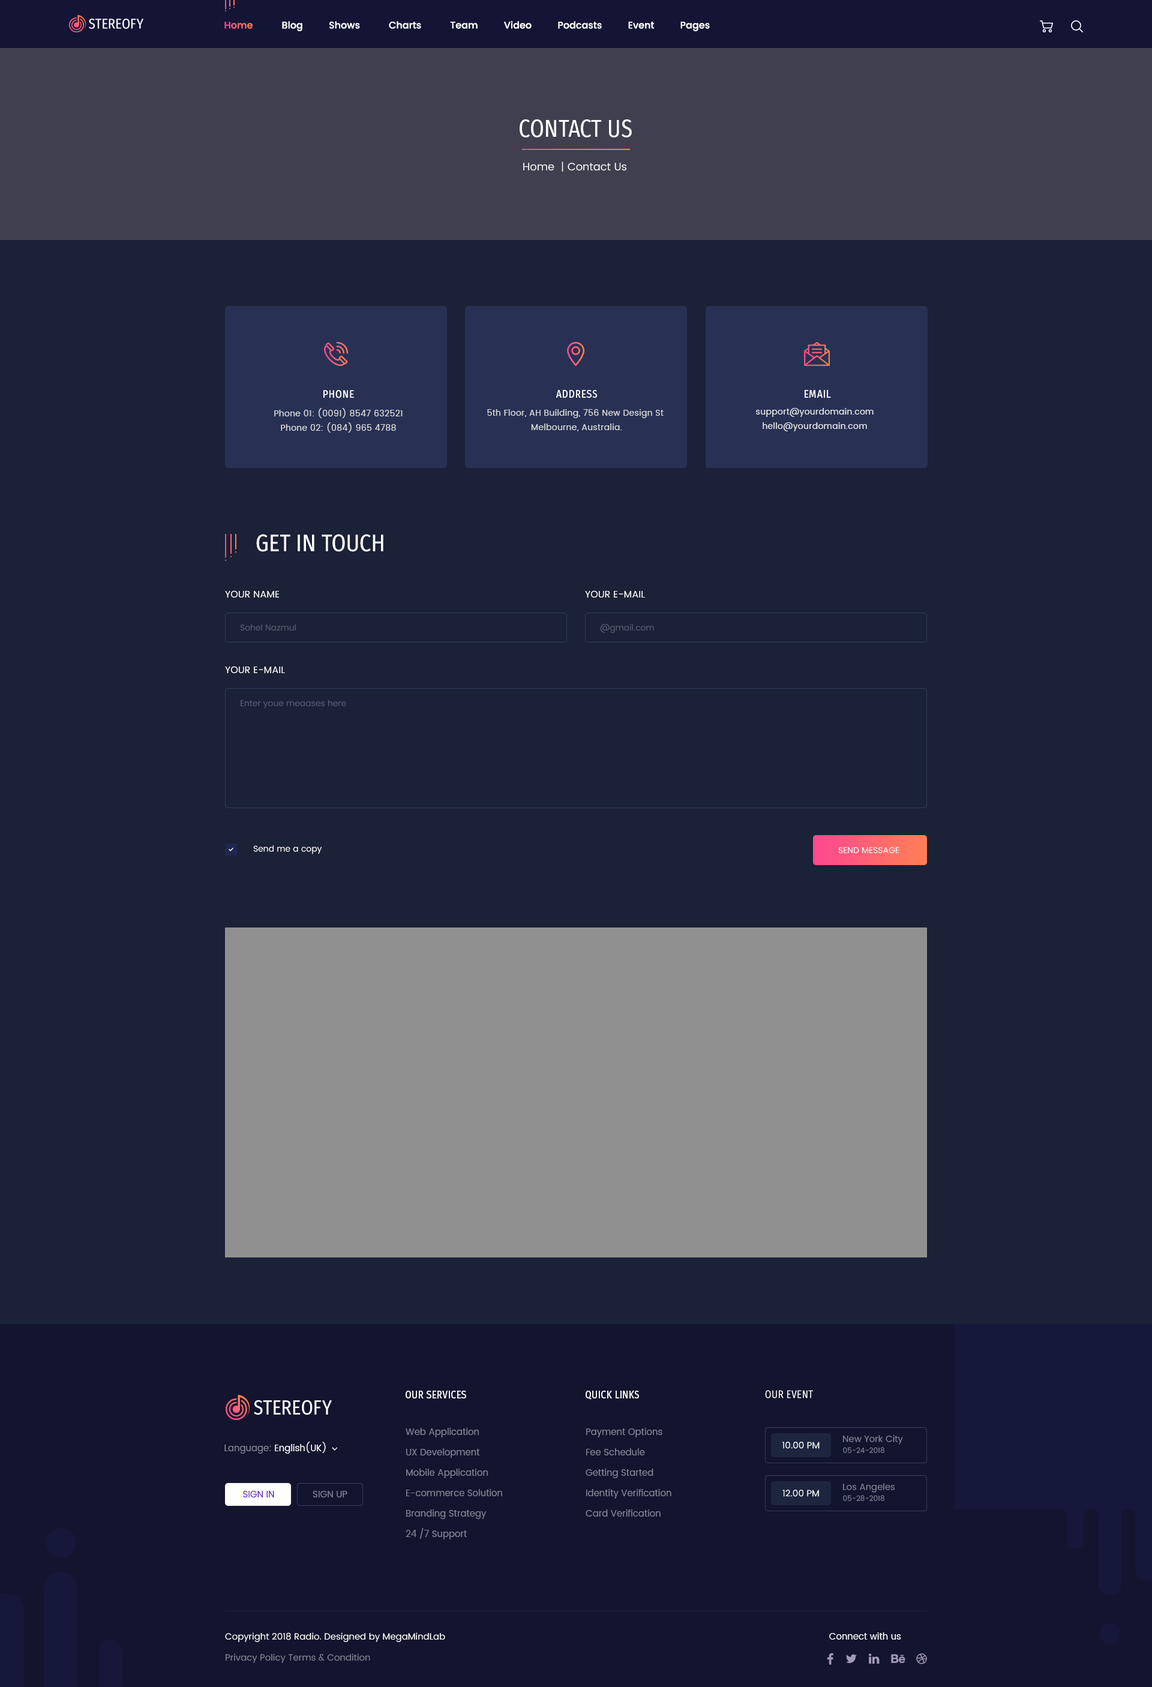
<style>
.page{position:relative;width:1152px;height:1687px;background:#1b2136}
.page>*{position:absolute;margin:0}
.t1{font:9.6px "Poppins-Medium"}
.t2{font:9.6px "Poppins-Medium";color:#ffffff}
.t3{font:9.6px "Poppins-Medium";color:#fd2954}
.t4{font:24px "FiraSansCondensed-Regular";color:#fefeff;text-transform:uppercase}
.t5{font:10.8px "Poppins-Regular";color:#f3f3f3}
.t6{font:10.8px "Poppins-Regular";color:#f2f2f2}
.t7{font:10.8px "FiraSansCondensed-Regular";letter-spacing:0.05em;color:#fffefe;text-transform:uppercase}
.t8{font:10.8px "FiraSansCondensed-Regular";letter-spacing:0.05em;color:#ffffff;text-transform:uppercase}
.t9{font:8.4px/14.4px "Poppins-Regular";letter-spacing:0.025em;color:#dbd9d9}
.t10{font:8.4px/14.4px "Poppins-Regular";letter-spacing:0.025em;color:#d9d9d9}
.t11{font:8.4px/14.4px "Poppins-Regular";letter-spacing:0.025em;color:#e7e7e7}
.t12{font:24px "FiraSansCondensed-Regular";color:#ffffff;text-transform:uppercase}
.t13{font:9.6px "Poppins-Regular";color:#ffffff;text-transform:uppercase}
.t14{font:8.4px "Poppins-Regular";color:#585e74}
.t15{font:8.4px "Poppins-Regular";color:#ffffff}
.t16{font:8.4px "Poppins-Regular";color:#ffffff;text-transform:uppercase}
.t17{font:10.8px "FiraSansCondensed-Regular";letter-spacing:0.015em;color:#ffffff;text-transform:uppercase}
.t18{font:9px/20.4px "Poppins-Regular";color:#848597}
.t19{font:9px "Poppins-Regular";color:#ffffff}
.t20{font:9px "Poppins-Regular";color:#848597}
.t21{font:9px "Poppins-Regular";color:#ffffff;text-transform:uppercase}
.t22{font:7.2px "Poppins-Regular";color:#848597}
.t23{font:9px "Poppins-Regular";color:#570fc6;text-transform:uppercase}
.t24{font:9px "Poppins-Regular";color:#848597;text-transform:uppercase}
</style>
<div class="page">
<p class="t1" style="left:224px;top:22px;width:29px;height:7px">Home</p>
<p class="t2" style="left:282px;top:21px;width:428px;height:10px"><span class="t3">                  </span>  Blog         Shows          Charts          Team         Video         Podcasts         Event         Pages</p>
<p class="t4" style="left:520px;top:119px;width:112px;height:18px">CONTACT US</p>
<p class="t5" style="left:523px;top:161px;width:103px;height:11px"><span class="t6">Home </span> | Contact Us</p>
<p class="t7" style="left:323px;top:390px;width:31px;height:8px">phone</p>
<p class="t8" style="left:556px;top:390px;width:41px;height:8px">address</p>
<p class="t8" style="left:805px;top:390px;width:26px;height:8px">email</p>
<p class="t9" style="left:274px;top:408px;width:129px;height:25px;text-align:center">Phone 01: (0091) 8547 632521<br>Phone 02: (084) 965 4788</p>
<p class="t10" style="left:487px;top:409px;width:177px;height:22px;text-align:center">5th Floor, AH Building, 756 New Design St <br>Melbourne, Australia.</p>
<p class="t11" style="left:756px;top:408px;width:118px;height:23px;text-align:center">support@yourdomain.com<br>hello@yourdomain.com</p>
<p class="t12" style="left:256px;top:534px;width:127px;height:18px">Get In Touch</p>
<p class="t13" style="left:225px;top:590px;width:54px;height:8px">Your Name</p>
<p class="t13" style="left:585px;top:590px;width:60px;height:8px">Your e-mail</p>
<p class="t14" style="left:240px;top:624px;width:56px;height:7px">Sohel Nazmul</p>
<p class="t14" style="left:600px;top:624px;width:54px;height:9px">@gmail.com</p>
<p class="t13" style="left:225px;top:666px;width:60px;height:7px">Your e-mail</p>
<p class="t14" style="left:241px;top:700px;width:105px;height:9px">Enter youe meaases here</p>
<p class="t15" style="left:253px;top:845px;width:69px;height:9px">Send me a copy</p>
<p class="t16" style="left:838px;top:847px;width:61px;height:6px">Send Message</p>
<p class="t17" style="left:406px;top:1391px;width:60px;height:8px">OUR SERVICES</p>
<p class="t17" style="left:586px;top:1391px;width:53px;height:9px">Quick Links</p>
<p class="t17" style="left:765px;top:1390px;width:48px;height:9px">our Event</p>
<p class="t18" style="left:406px;top:1428px;width:96px;height:112px;text-align:right">Web Application<br>UX Development<br>Mobile Application<br>E-commerce Solution<br>Branding Strategy<br>24 /7 Support</p>
<p class="t18" style="left:586px;top:1428px;width:85px;height:89px;text-align:right">Payment Options<br>Fee Schedule<br>Getting Started<br>Identity Verification<br>Card Verification</p>
<p class="t19" style="left:224px;top:1442px;width:102px;height:12px"><span class="t20">Language: </span>English(UK)</p>
<p class="t21" style="left:782px;top:1442px;width:38px;height:7px">10.00 Pm</p>
<p class="t20" style="left:843px;top:1435px;width:60px;height:10px">New York City</p>
<p class="t22" style="left:843px;top:1447px;width:41px;height:6px">05-24-2018</p>
<p class="t23" style="left:243px;top:1491px;width:31px;height:7px">Sign In</p>
<p class="t24" style="left:313px;top:1491px;width:34px;height:7px">Sign Up</p>
<p class="t21" style="left:782px;top:1490px;width:37px;height:7px">12.00 Pm</p>
<p class="t20" style="left:843px;top:1483px;width:52px;height:10px">Los Angeles</p>
<p class="t22" style="left:843px;top:1495px;width:41px;height:6px">05-28-2018</p>
<p class="t19" style="left:225px;top:1633px;width:220px;height:9px">Copyright 2018 Radio. Designed by MegaMindLab</p>
<p class="t19" style="left:829px;top:1633px;width:72px;height:7px">Connect with us</p>
<p class="t20" style="left:226px;top:1654px;width:144px;height:9px">Privacy Policy Terms &amp; Condition</p>
</div>
